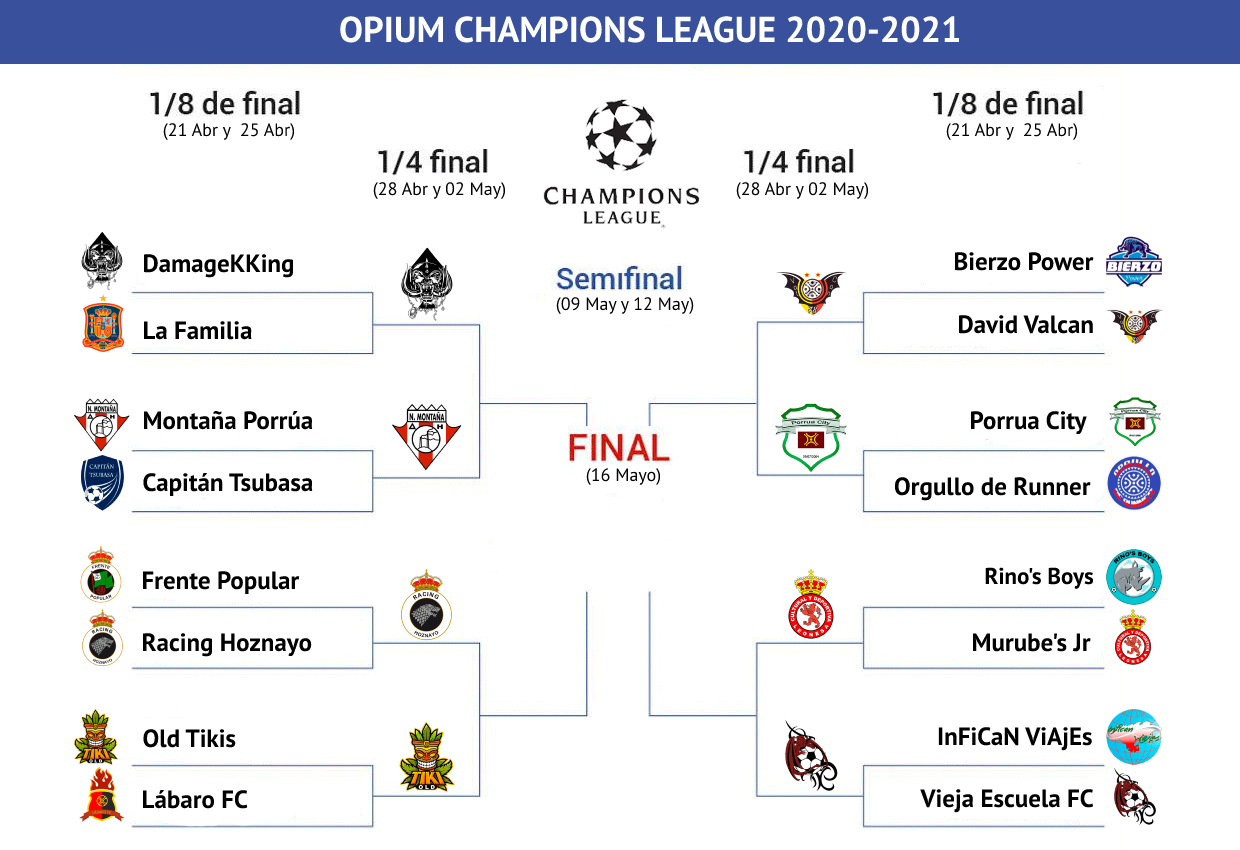
<style>
.page{position:relative;width:1240px;height:850px;background:#ffffff}
.page>*{position:absolute;margin:0}
.t1{font:36px "MyriadPro-Bold";color:#ffffff}
.t2{font:18px "MyriadPro-Regular";color:#000000}
.t3{font:25px "MyriadPro-Bold";color:#000000}
.t4{font:23px "MyriadPro-Bold";color:#000000}
</style>
<div class="page">
<p class="t1" style="left:340px;top:16px;width:620px;height:27px">OPIUM CHAMPIONS LEAGUE 2020-2021</p>
<p class="t2" style="left:163px;top:123px;width:132px;height:17px">(21 Abr y  25 Abr)</p>
<p class="t2" style="left:946px;top:123px;width:132px;height:17px">(21 Abr y  25 Abr)</p>
<p class="t2" style="left:373px;top:182px;width:133px;height:17px">(28 Abr y 02 May)</p>
<p class="t2" style="left:736px;top:182px;width:133px;height:17px">(28 Abr y 02 May)</p>
<p class="t3" style="left:143px;top:254px;width:151px;height:24px">DamageKKing</p>
<p class="t3" style="left:954px;top:252px;width:140px;height:19px">Bierzo Power</p>
<p class="t2" style="left:556px;top:297px;width:138px;height:17px">(09 May y 12 May)</p>
<p class="t3" style="left:958px;top:315px;width:135px;height:19px">David Valcan</p>
<p class="t3" style="left:143px;top:321px;width:109px;height:19px">La Familia</p>
<p class="t3" style="left:143px;top:410px;width:170px;height:20px">Montaña Porrúa</p>
<p class="t3" style="left:970px;top:411px;width:117px;height:24px">Porrua City</p>
<p class="t3" style="left:143px;top:473px;width:170px;height:23px">Capitán Tsubasa</p>
<p class="t2" style="left:586px;top:468px;width:75px;height:17px">(16 Mayo)</p>
<p class="t3" style="left:894px;top:477px;width:197px;height:24px">Orgullo de Runner</p>
<p class="t4" style="left:985px;top:567px;width:109px;height:22px">Rino's Boys</p>
<p class="t3" style="left:142px;top:571px;width:158px;height:23px">Frente Popular</p>
<p class="t3" style="left:142px;top:633px;width:170px;height:24px">Racing Hoznayo</p>
<p class="t3" style="left:972px;top:633px;width:119px;height:19px">Murube's Jr</p>
<p class="t3" style="left:143px;top:729px;width:93px;height:19px">Old Tikis</p>
<p class="t3" style="left:938px;top:727px;width:154px;height:24px">InFiCaN ViAjEs</p>
<p class="t3" style="left:142px;top:790px;width:106px;height:19px">Lábaro FC</p>
<p class="t3" style="left:920px;top:789px;width:174px;height:24px">Vieja Escuela FC</p>
</div>
